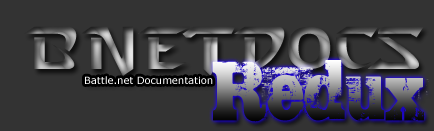
<style>
.page{position:relative;width:434px;height:131px;background:#333333}
.page>*{position:absolute;margin:0}
.t1{font:60px "StarcraftNormal"}
.t2{font:60px "TRASHED"}
.t3{font:10px "Verdana";color:#ffffff}
</style>
<div class="page">
<p class="t1" style="left:24px;top:26px;width:400px;height:50px">BNETDocs</p>
<p class="t2" style="left:212px;top:60px;width:217px;height:62px">Redux</p>
<p class="t3" style="left:85px;top:76px;width:128px;height:8px">Battle.net Documentation</p>
</div>
